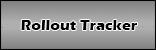
<style>
.page{position:relative;width:156px;height:50px}
.page>*{position:absolute;margin:0}
.t1{font:15px "ErasITC-Bold";color:#000000}
</style>
<div class="page">
<p class="t1" style="left:21px;top:20px;width:117px;height:10px">Rollout Tracker</p>
</div>
